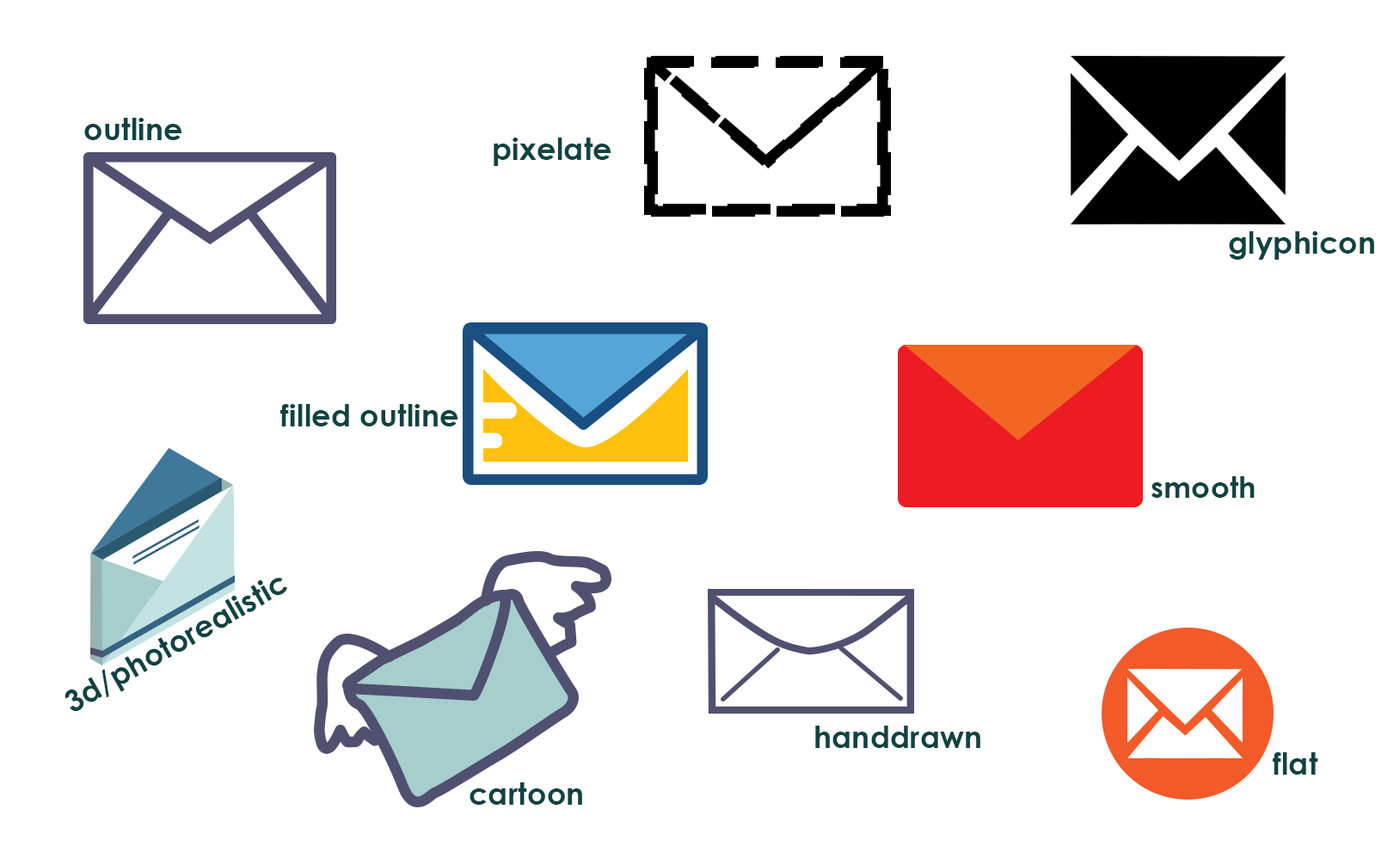
<style>
.page{position:relative;width:1400px;height:852px;background:#ffffff}
.page>*{position:absolute;margin:0}
.t1{font:29.9px "CenturyGothic-Bold";letter-spacing:0.01em;color:#0f4342}
.t2{font:29.4px "CenturyGothic-Bold";letter-spacing:0.01em;color:#0f4342}
</style>
<div class="page">
<p class="t1" style="left:84px;top:118px;width:97px;height:22px">outline</p>
<p class="t1" style="left:493px;top:138px;width:117px;height:28px">pixelate</p>
<p class="t1" style="left:1229px;top:231px;width:145px;height:29px">glyphicon</p>
<p class="t1" style="left:280px;top:404px;width:177px;height:22px">filled outline</p>
<p class="t2" style="left:1151px;top:476px;width:103px;height:22px">smooth</p>
<p class="t1" style="left:64px;top:578px;width:223px;height:133px;rotate:-30deg">3d/photorealistic</p>
<p class="t1" style="left:815px;top:726px;width:165px;height:22px">handdrawn</p>
<p class="t1" style="left:1272px;top:752px;width:46px;height:23px">flat</p>
<p class="t1" style="left:469px;top:782px;width:113px;height:23px">cartoon</p>
</div>
